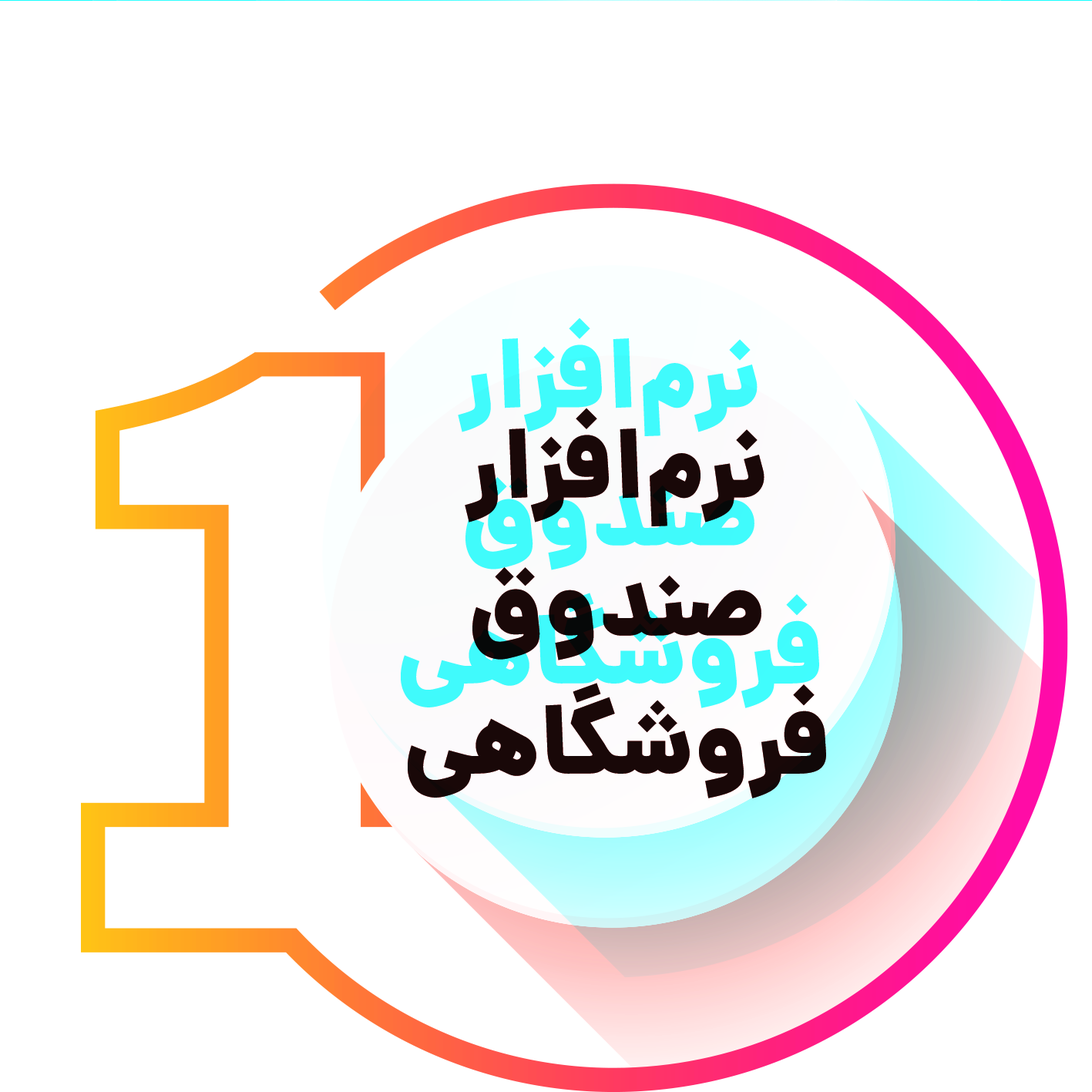
<style>
.page{position:relative;width:1092px;height:1092px;background:#ffffff}
.page>*{position:absolute;margin:0}
.t1{font:96.3px/138.1px "Dana-Black";color:#40fbfc}
</style>
<div class="page">
<p class="t1" style="left:401px;top:317px;width:418px;height:390px;text-align:center">نرم‌افزار صندوق فروشگاهی</p>
</div>
